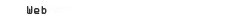
<style>
.page{position:relative;width:229px;height:17px;background:#ffffff}
.page>*{position:absolute;margin:0}
.t1{font:10px "OCRAStd";color:#333333}
</style>
<div class="page">
<p class="t1" style="left:27px;top:6px;width:20px;height:8px">Web</p>
</div>
